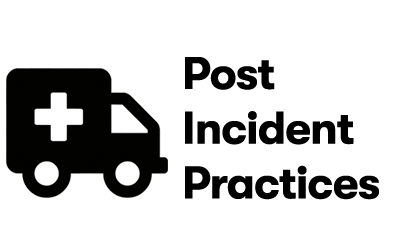
<style>
.page{position:relative;width:400px;height:250px;background:#ffffff}
.page>*{position:absolute;margin:0}
.t1{font:45.6px "GTWalsheim-Bold";letter-spacing:-0.02em;color:#000000}
</style>
<div class="page">
<p class="t1" style="left:185px;top:57px;width:194px;height:143px">Post<br>Incident<br>Practices</p>
</div>
